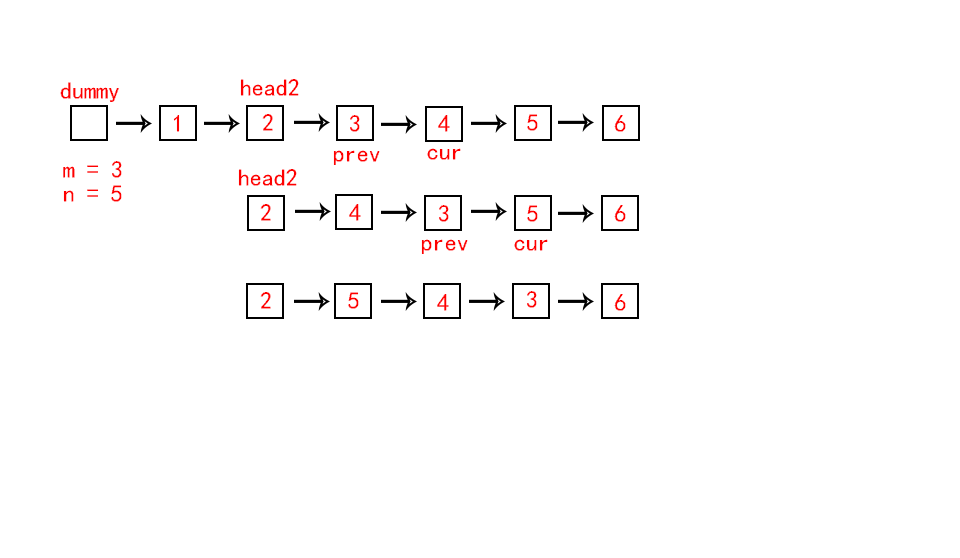
<style>
.page{position:relative;width:960px;height:558px;background:#ffffff}
.page>*{position:absolute;margin:0}
.t1{font:24px "¿¬Ìå";color:#fe0000}
</style>
<div class="page">
<p class="t1" style="left:60px;top:82px;width:59px;height:20px">dummy</p>
<p class="t1" style="left:240px;top:79px;width:59px;height:17px">head2</p>
<p class="t1" style="left:173px;top:115px;width:7px;height:17px">1</p>
<p class="t1" style="left:262px;top:114px;width:11px;height:17px">2</p>
<p class="t1" style="left:350px;top:115px;width:10px;height:17px">3</p>
<p class="t1" style="left:438px;top:115px;width:12px;height:17px">4</p>
<p class="t1" style="left:527px;top:114px;width:11px;height:17px">5</p>
<p class="t1" style="left:614px;top:115px;width:12px;height:17px">6</p>
<p class="t1" style="left:333px;top:150px;width:47px;height:15px">prev</p>
<p class="t1" style="left:427px;top:148px;width:34px;height:12px">cur</p>
<p class="t1" style="left:63px;top:161px;width:59px;height:17px">m = 3</p>
<p class="t1" style="left:238px;top:169px;width:59px;height:17px">head2</p>
<p class="t1" style="left:63px;top:185px;width:59px;height:17px">n = 5</p>
<p class="t1" style="left:260px;top:204px;width:11px;height:17px">2</p>
<p class="t1" style="left:349px;top:204px;width:12px;height:17px">4</p>
<p class="t1" style="left:439px;top:205px;width:10px;height:17px">3</p>
<p class="t1" style="left:527px;top:205px;width:11px;height:17px">5</p>
<p class="t1" style="left:614px;top:205px;width:12px;height:17px">6</p>
<p class="t1" style="left:421px;top:239px;width:47px;height:15px">prev</p>
<p class="t1" style="left:514px;top:239px;width:34px;height:12px">cur</p>
<p class="t1" style="left:260px;top:292px;width:11px;height:17px">2</p>
<p class="t1" style="left:348px;top:292px;width:11px;height:17px">5</p>
<p class="t1" style="left:437px;top:294px;width:12px;height:17px">4</p>
<p class="t1" style="left:527px;top:291px;width:10px;height:17px">3</p>
<p class="t1" style="left:614px;top:294px;width:12px;height:17px">6</p>
</div>
